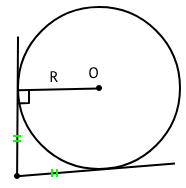
<style>
.page{position:relative;width:186px;height:188px;background:#ffffff}
.page>*{position:absolute;margin:0}
.t1{font:15.2px "PTSans-Regular";color:#000000}
</style>
<div class="page">
<p class="t1" style="left:50px;top:71px;width:8px;height:11px">R</p>
<p class="t1" style="left:89px;top:67px;width:9px;height:12px">O</p>
</div>
